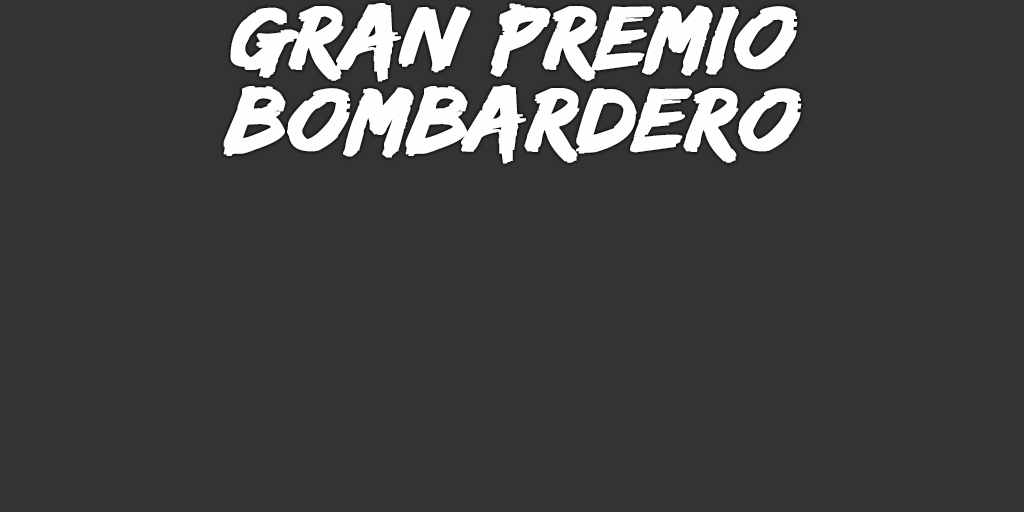
<style>
.page{position:relative;width:1024px;height:512px;background:#333333}
.page>*{position:absolute;margin:0}
.t1{font:93px/82px "EdoSZ";color:#fefefe;font-weight:bold;font-style:italic;scale:1.04 1}
</style>
<div class="page">
<p class="t1" style="left:223px;top:3px;width:579px;height:161px;text-align:center">gran premio<br>bombardero</p>
</div>
